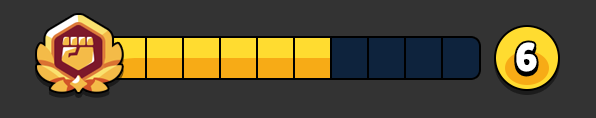
<style>
.page{position:relative;width:596px;height:118px;background:#333333}
.page>*{position:absolute;margin:0}
.t1{font:40px "LilitaOne";color:#ffffff;text-transform:uppercase}
</style>
<div class="page">
<p class="t1" style="left:516px;top:42px;width:21px;height:30px">6</p>
</div>
